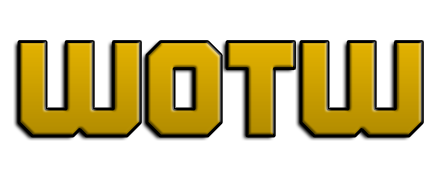
<style>
.page{position:relative;width:448px;height:175px;background:#ffffff}
.page>*{position:absolute;margin:0}
.t1{font:137.9px "ColdWarm"}
</style>
<div class="page">
<p class="t1" style="left:19px;top:41px;width:404px;height:95px">WOTW</p>
</div>
